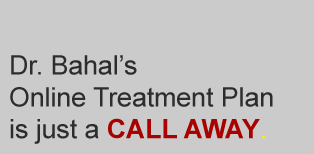
<style>
.page{position:relative;width:314px;height:154px;background:#cbcbcb}
.page>*{position:absolute;margin:0}
.t1{font:26.6px "ArialMT";color:#2d2d2d}
.t2{font:26.6px "Arial-BoldMT";color:#a90000}
.t3{font:26.6px "ArialMT";color:#f9f10c}
</style>
<div class="page">
<p class="t1" style="left:10px;top:55px;width:263px;height:89px">Dr. Bahal’s <br>Online Treatment Plan<br>is just a <span class="t2">CALL AWAY</span><span class="t3">.</span></p>
</div>
